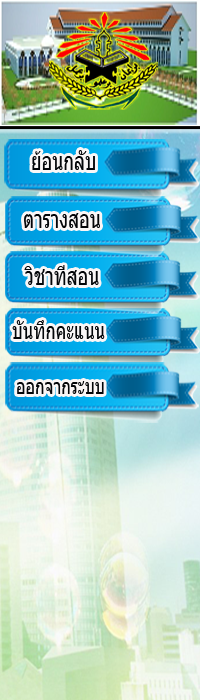
<style>
.page{position:relative;width:200px;height:700px}
.page>*{position:absolute;margin:0}
.t1{font:25.2px "Tahoma";color:#030508;scale:0.71 1}
.t2{font:24px "Tahoma";color:#030508;scale:0.71 1}
.t3{font:22.4px "Tahoma";color:#030508;scale:0.71 1}
</style>
<div class="page">
<p class="t1" style="left:32px;top:150px;width:63px;height:20px">ย้อนกลับ</p>
<p class="t1" style="left:24px;top:213px;width:76px;height:15px">ตารางสอน</p>
<p class="t1" style="left:24px;top:265px;width:75px;height:20px">วิชาที่สอน</p>
<p class="t2" style="left:12px;top:320px;width:93px;height:19px">บันทึกคะแนน</p>
<p class="t3" style="left:17px;top:381px;width:87px;height:13px">ออกจากระบบ</p>
</div>
